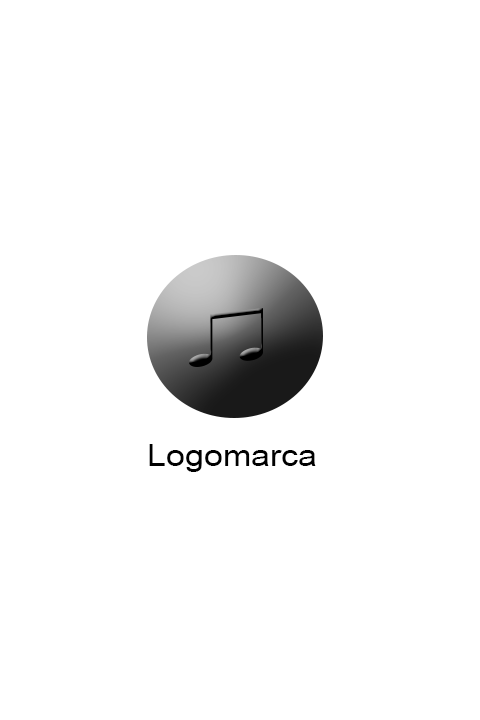
<style>
.page{position:relative;width:480px;height:720px;background:#ffffff}
.page>*{position:absolute;margin:0}
.t1{font:31.3px "ArialMT";color:#010101;scale:1.09 1}
</style>
<div class="page">
<p class="t1" style="left:149px;top:444px;width:167px;height:28px">Logomarca</p>
</div>
